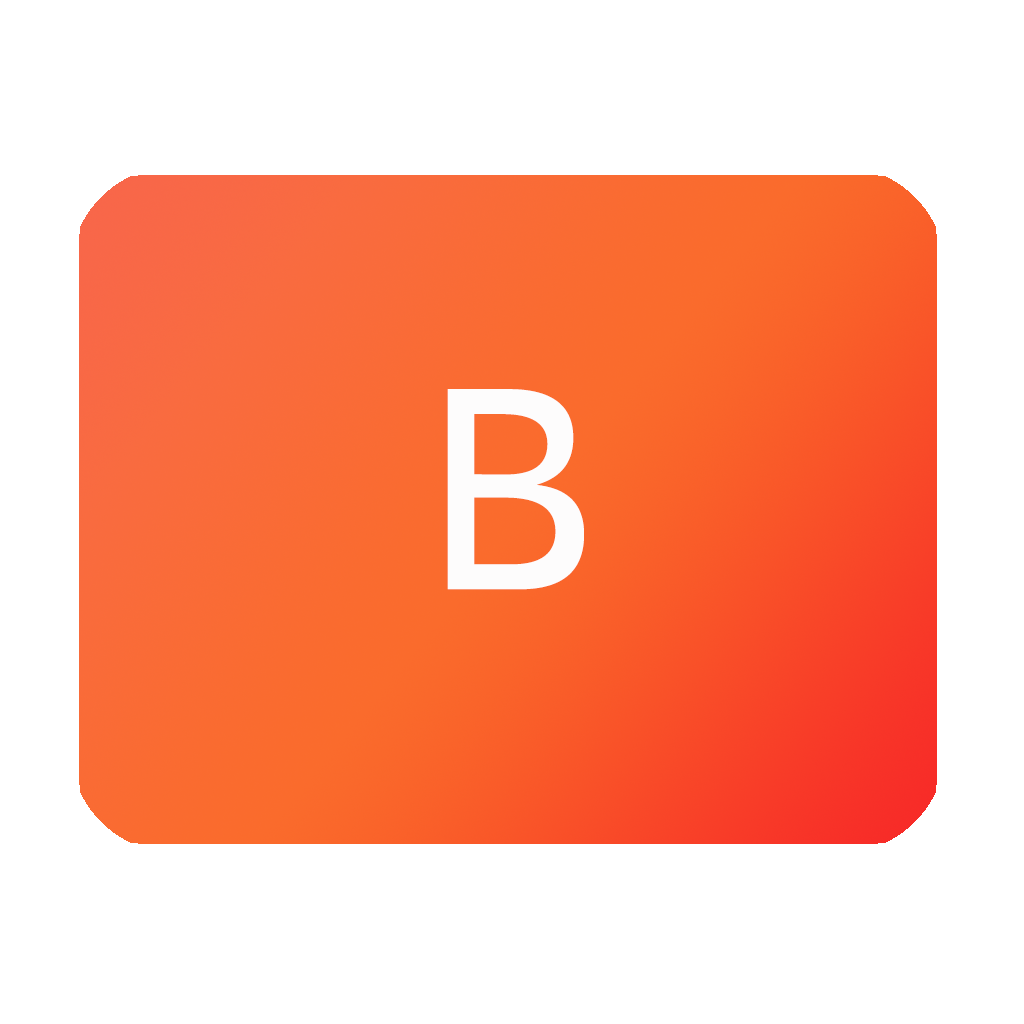
<style>
.page{position:relative;width:1024px;height:1024px;background:#ffffff}
.page>*{position:absolute;margin:0}
.t1{font:300px "SIL-Hei-Med-Jian";color:#fdfcfc}
</style>
<div class="page">
<p class="t1" style="left:447px;top:389px;width:137px;height:201px">B</p>
</div>
